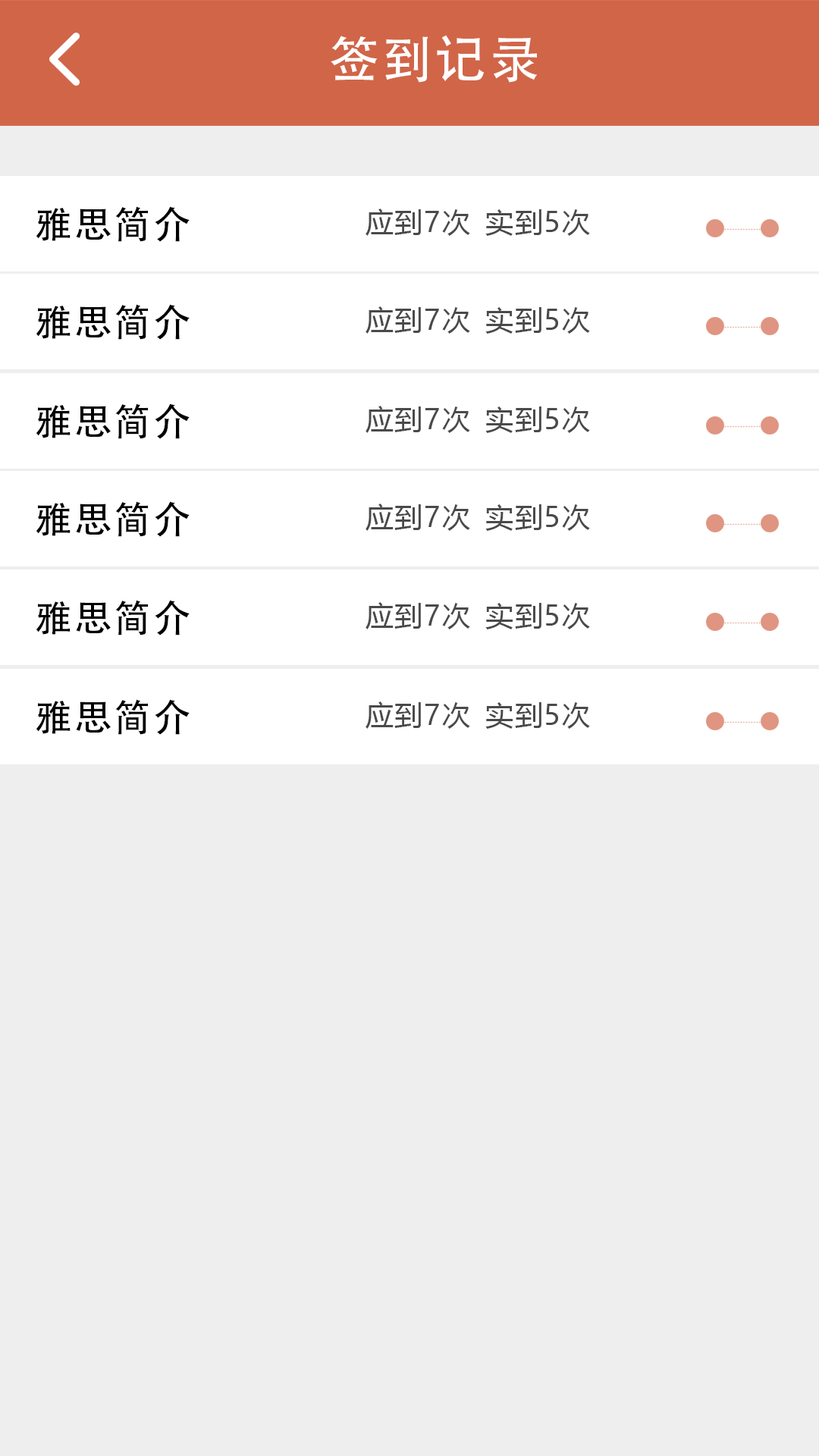
<style>
.page{position:relative;width:819px;height:1456px;background:#efeeee}
.page>*{position:absolute;margin:0}
.t1{font:50.8px "AdobeHeitiStd-Regular";letter-spacing:0.06em;color:#ffffff}
.t2{font:37.1px "AdobeHeitiStd-Regular";letter-spacing:0.06em;color:#000000}
.t3{font:27.6px "MicrosoftYaHei";letter-spacing:0.06em;color:#4a4a4a}
</style>
<div class="page">
<p class="t1" style="left:331px;top:35px;width:206px;height:48px">签到记录</p>
<p class="t2" style="left:36px;top:206px;width:154px;height:36px">雅思简介</p>
<p class="t3" style="left:366px;top:209px;width:104px;height:27px">应到7次</p>
<p class="t3" style="left:485px;top:209px;width:105px;height:27px">实到5次</p>
<p class="t2" style="left:36px;top:304px;width:154px;height:36px">雅思简介</p>
<p class="t3" style="left:366px;top:306px;width:104px;height:28px">应到7次</p>
<p class="t3" style="left:485px;top:307px;width:105px;height:27px">实到5次</p>
<p class="t2" style="left:36px;top:403px;width:154px;height:36px">雅思简介</p>
<p class="t3" style="left:366px;top:406px;width:104px;height:27px">应到7次</p>
<p class="t3" style="left:485px;top:406px;width:105px;height:27px">实到5次</p>
<p class="t2" style="left:36px;top:501px;width:154px;height:36px">雅思简介</p>
<p class="t3" style="left:366px;top:504px;width:104px;height:27px">应到7次</p>
<p class="t3" style="left:485px;top:504px;width:105px;height:27px">实到5次</p>
<p class="t2" style="left:36px;top:600px;width:154px;height:35px">雅思简介</p>
<p class="t3" style="left:366px;top:602px;width:104px;height:27px">应到7次</p>
<p class="t3" style="left:485px;top:603px;width:105px;height:26px">实到5次</p>
<p class="t2" style="left:36px;top:699px;width:154px;height:36px">雅思简介</p>
<p class="t3" style="left:366px;top:701px;width:104px;height:28px">应到7次</p>
<p class="t3" style="left:485px;top:702px;width:105px;height:27px">实到5次</p>
</div>
